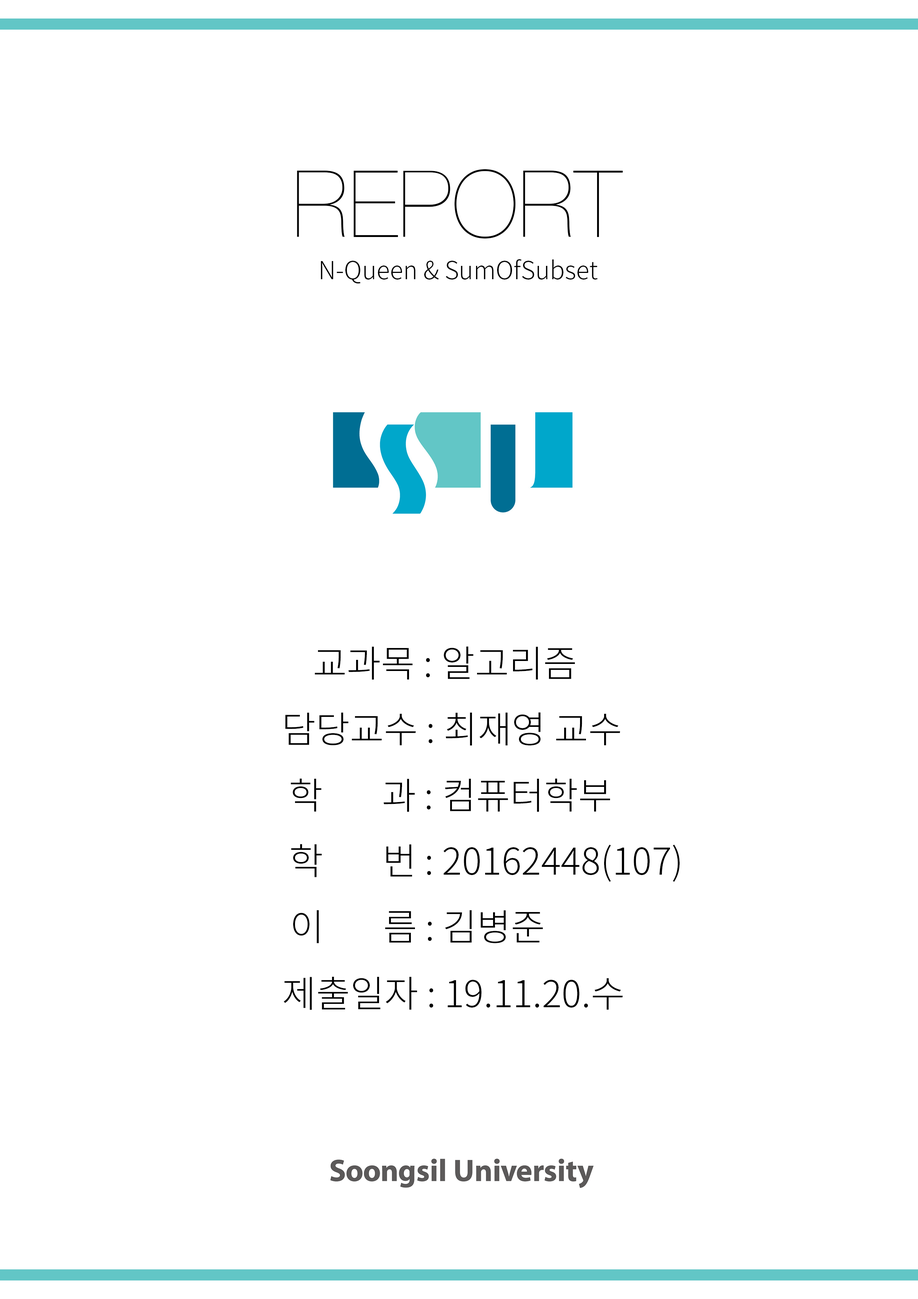
<style>
.page{position:relative;width:918px;height:1299px;background:#ffffff}
.page>*{position:absolute;margin:0}
.t1{font:24.7px "NotoSansCJKkr-Light";color:#000000}
.t2{font:37px "NotoSansCJKkr-Light";color:#000000}
</style>
<div class="page">
<p class="t1" style="left:321px;top:259px;width:277px;height:25px">N-Queen &amp; SumOfSubset</p>
<p class="t2" style="left:315px;top:646px;width:260px;height:34px">교과목 : 알고리즘</p>
<p class="t2" style="left:285px;top:712px;width:335px;height:34px">담당교수 : 최재영 교수</p>
<p class="t2" style="left:291px;top:778px;width:319px;height:34px">학     과 : 컴퓨터학부</p>
<p class="t2" style="left:291px;top:844px;width:389px;height:38px">학     번 : 20162448(107)</p>
<p class="t2" style="left:293px;top:910px;width:250px;height:33px">이      름 : 김병준</p>
<p class="t2" style="left:284px;top:976px;width:339px;height:34px">제출일자 : 19.11.20.수</p>
</div>
